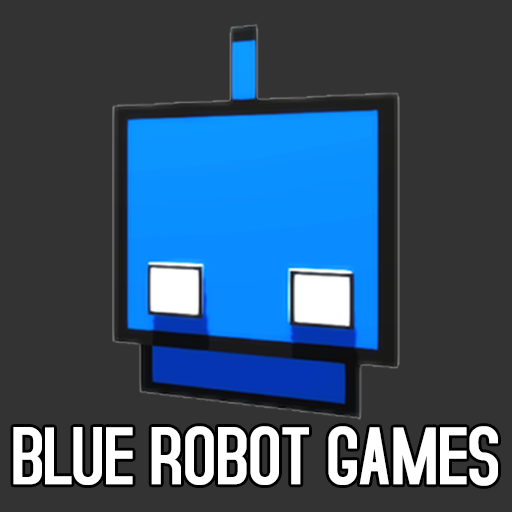
<style>
.page{position:relative;width:512px;height:512px;background:#333333}
.page>*{position:absolute;margin:0}
.t1{font:87.5px "AccidentalPresidency";letter-spacing:-0.01em;color:#ffffff;text-transform:uppercase}
</style>
<div class="page">
<p class="t1" style="left:13px;top:426px;width:485px;height:60px">BLUE ROBOT GAMES</p>
</div>
